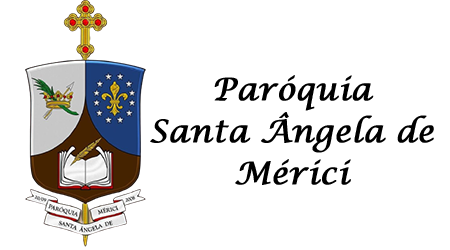
<style>
.page{position:relative;width:450px;height:250px;background:#ffffff}
.page>*{position:absolute;margin:0}
.t1{font:31px/16px "LucidaCalligraphy-Italic";color:#000000;font-weight:bold}
.t2{font:33px/16px "LucidaCalligraphy-Italic";color:#000000;font-weight:bold}
</style>
<div class="page">
<p class="t1" style="left:150px;top:75px;width:284px;height:110px;text-align:center"><span class="t2"><br><br><br></span>Paróquia<br><br>Santa Ângela de <br><br>Mérici</p>
</div>
